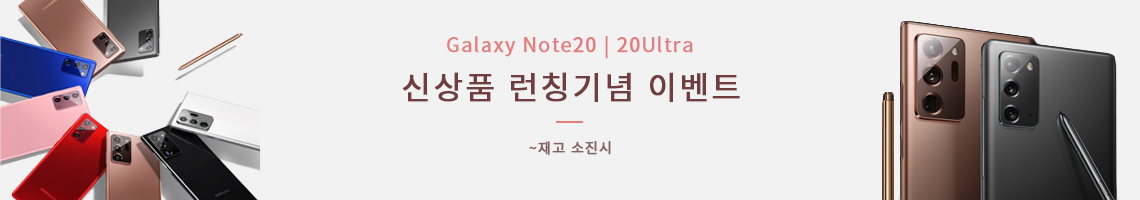
<style>
.page{position:relative;width:1140px;height:200px;background:#f3f2f2}
.page>*{position:absolute;margin:0}
.t1{font:19.7px "NotoSansCJKkr-Regular";letter-spacing:0.05em;color:#e47d7d;font-weight:bold}
.t2{font:32px "NotoSansCJKkr-Regular";letter-spacing:0.05em;color:#703e3e;font-weight:bold}
.t3{font:14px "NotoSansCJKkr-Regular";letter-spacing:0.05em;color:#856262;font-weight:bold}
</style>
<div class="page">
<p class="t1" style="left:447px;top:36px;width:246px;height:23px">Galaxy Note20 | 20Ultra</p>
<p class="t2" style="left:402px;top:72px;width:338px;height:30px">신상품 런칭기념 이벤트</p>
<p class="t3" style="left:529px;top:141px;width:82px;height:14px">~재고 소진시</p>
</div>
